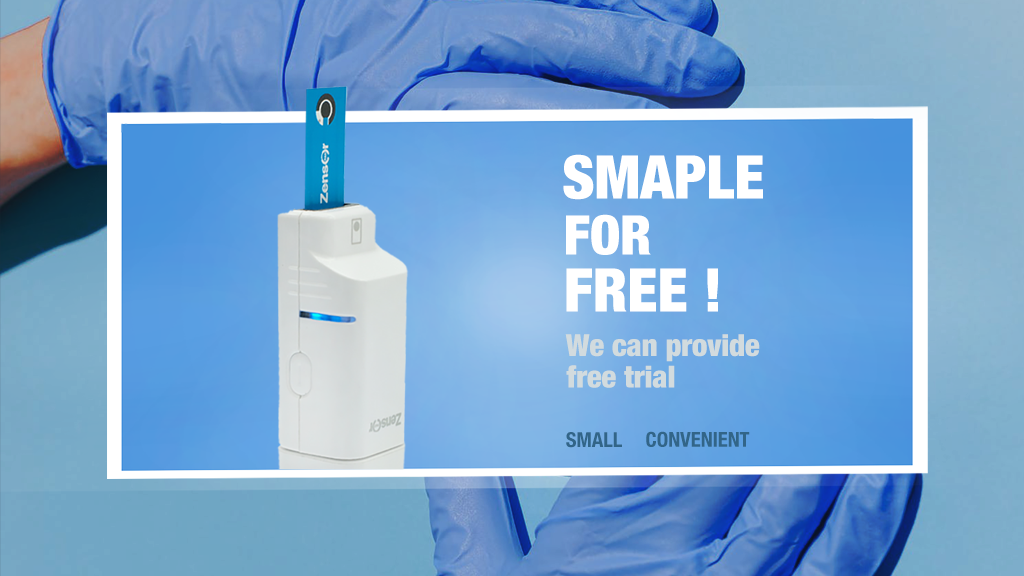
<style>
.page{position:relative;width:1024px;height:576px}
.page>*{position:absolute;margin:0}
.t1{font:60.3px "HelveticaNeue-CondensedBlack";color:#ffffff}
.t2{font:54.5px "HelveticaNeue-CondensedBlack";color:#ffffff}
.t3{font:30.4px "HelveticaNeue-CondensedBlack";color:#d2dbde}
.t4{font:20.6px "HelveticaNeue-CondensedBold";color:#326588}
</style>
<div class="page">
<p class="t1" style="left:563px;top:154px;width:200px;height:46px">SMAPLE</p>
<p class="t2" style="left:566px;top:214px;width:85px;height:41px">FOR</p>
<p class="t1" style="left:566px;top:268px;width:152px;height:44px">FREE !</p>
<p class="t3" style="left:565px;top:334px;width:195px;height:28px">We can provide</p>
<p class="t3" style="left:566px;top:365px;width:109px;height:23px">free trial</p>
<p class="t4" style="left:566px;top:432px;width:56px;height:16px">SMALL</p>
<p class="t4" style="left:646px;top:431px;width:104px;height:16px">CONVENIENT</p>
</div>
